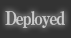
<style>
.page{position:relative;width:71px;height:38px;background:#333333}
.page>*{position:absolute;margin:0}
.t1{font:18px "RyuminPro-ExBold";letter-spacing:-0.08em;color:#c9c9c9;scale:0.9 1}
</style>
<div class="page">
<p class="t1" style="left:5px;top:11px;width:60px;height:17px">Deployed</p>
</div>
